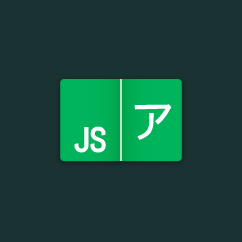
<style>
.page{position:relative;width:242px;height:242px;background:#1a3332}
.page>*{position:absolute;margin:0}
.t1{font:45px "DroidSansFallback";color:#ffffff}
.t2{font:33px "Abel-Regular";color:#ffffff}
</style>
<div class="page">
<p class="t1" style="left:134px;top:104px;width:38px;height:36px">ア</p>
<p class="t2" style="left:74px;top:126px;width:32px;height:27px">JS</p>
</div>
